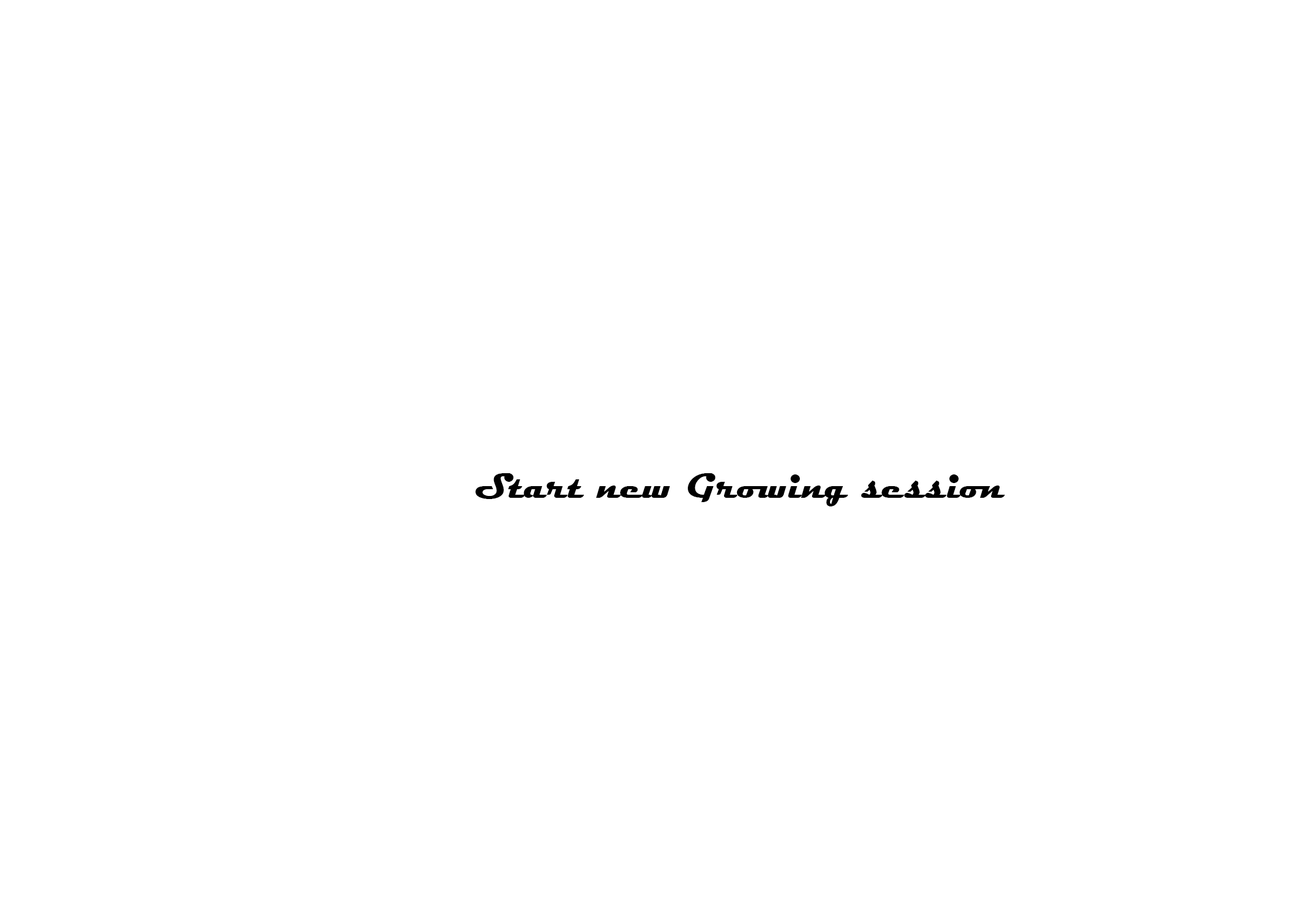
<style>
.page{position:relative;width:1292px;height:923px;background:#ffffff}
.page>*{position:absolute;margin:0}
.t1{font:35.9px "Magneto-Bold";color:#000000}
.t2{font:30.8px "MyriadPro-Bold";color:#000000}
</style>
<div class="page">
<p class="t1" style="left:475px;top:473px;width:530px;height:33px"><span class="t2"><br><br></span>  Start new Growing session</p>
</div>
